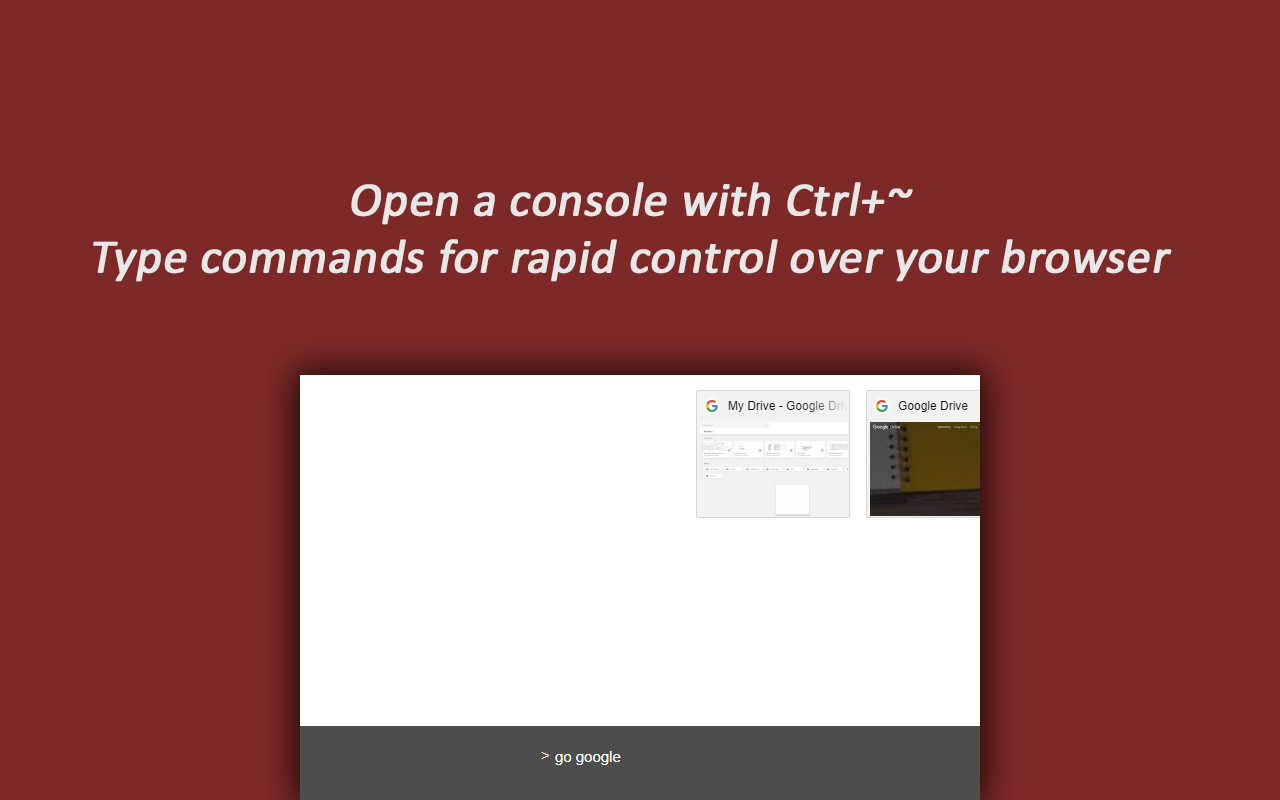
<style>
.page{position:relative;width:1280px;height:800px;background:#7d2927}
.page>*{position:absolute;margin:0}
.t1{font:48px "Calibri";color:#e7e7e7;font-weight:bold;font-style:italic}
</style>
<div class="page">
<p class="t1" style="left:93px;top:182px;width:1079px;height:100px;text-align:center">Open a console with Ctrl+~<br>Type commands for rapid control over your browser</p>
</div>
